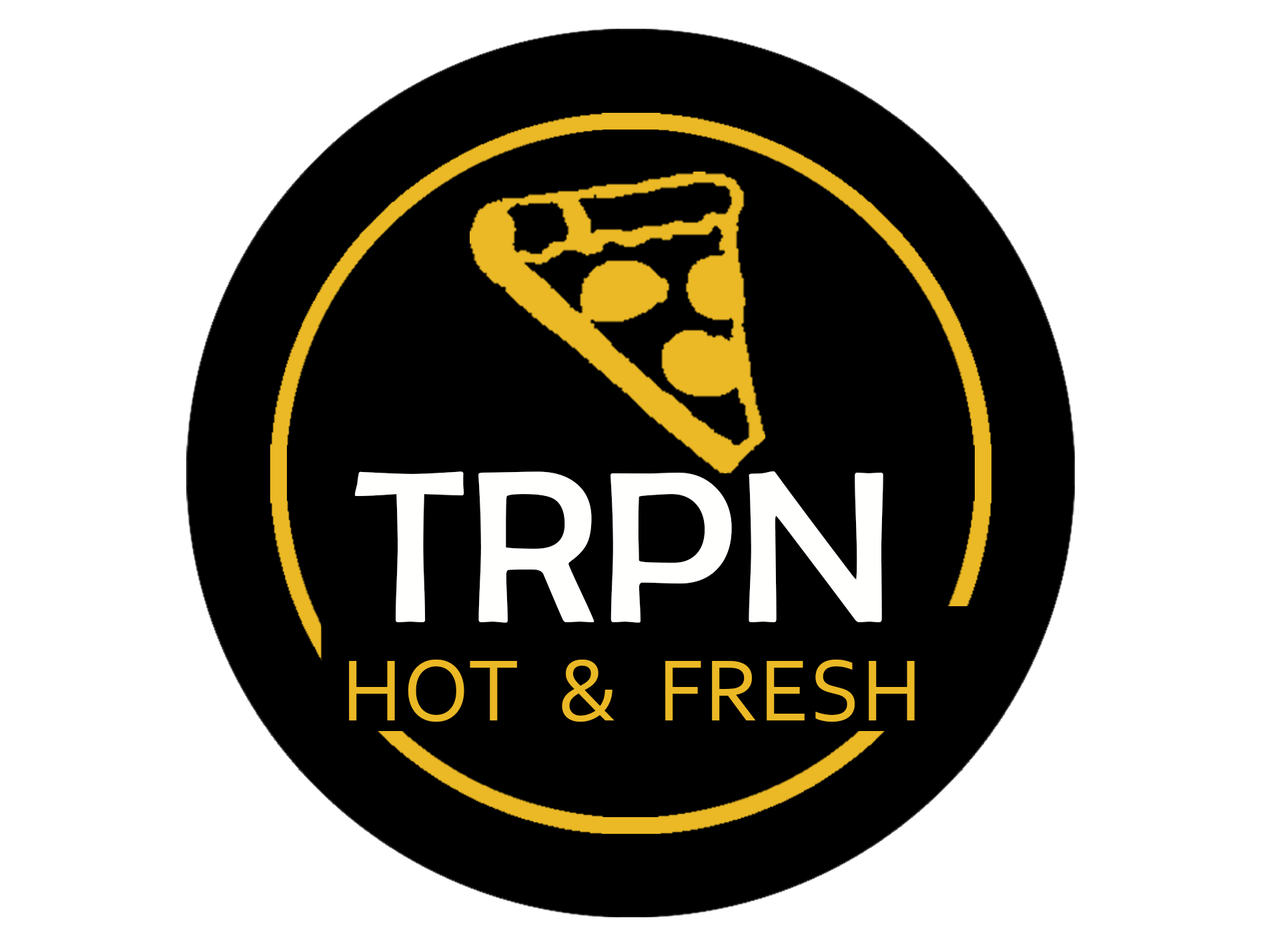
<style>
.page{position:relative;width:1261px;height:946px;background:#ffffff}
.page>*{position:absolute;margin:0}
.t1{font:218px "BerlinSansFB-Reg";letter-spacing:0.01em;color:#fffffe}
.t2{font:90.9px "Corbel";letter-spacing:0.01em;color:#ebb925}
</style>
<div class="page">
<p class="t1" style="left:355px;top:471px;width:528px;height:152px">TRPN</p>
<p class="t2" style="left:349px;top:659px;width:566px;height:62px">HOT  &amp;  FRESH</p>
</div>
